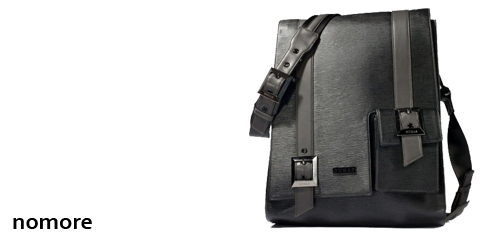
<style>
.page{position:relative;width:480px;height:240px;background:#ffffff}
.page>*{position:absolute;margin:0}
.t1{font:24px "Corbel-Bold";color:#000000}
</style>
<div class="page">
<p class="t1" style="left:13px;top:218px;width:79px;height:11px">nomore</p>
</div>
